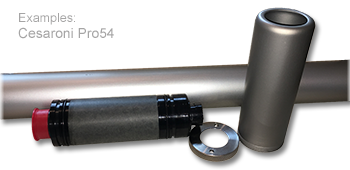
<style>
.page{position:relative;width:350px;height:170px;background:#ffffff}
.page>*{position:absolute;margin:0}
.t1{font:13.9px "ArialMT";color:#a6a5a5}
.t2{font:12.5px "ArialMT";color:#a6a5a5}
</style>
<div class="page">
<p class="t1" style="left:18px;top:13px;width:96px;height:26px"><span class="t2">Examples:<br></span>Cesaroni Pro54</p>
</div>
